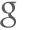
<style>
.page{position:relative;width:30px;height:30px;background:#ffffff}
.page>*{position:absolute;margin:0}
.t1{font:26px "Zocial-Regular";color:#595959}
</style>
<div class="page">
<p class="t1" style="left:0px;top:1px;width:17px;height:27px">G</p>
</div>
